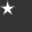
<style>
.page{position:relative;width:32px;height:32px;background:#333333}
.page>*{position:absolute;margin:0}
.t1{font:16px "KozGoPr6N-Regular";color:#ffffff}
</style>
<div class="page">
<p class="t1" style="left:0px;top:0px;width:15px;height:15px">★</p>
</div>
